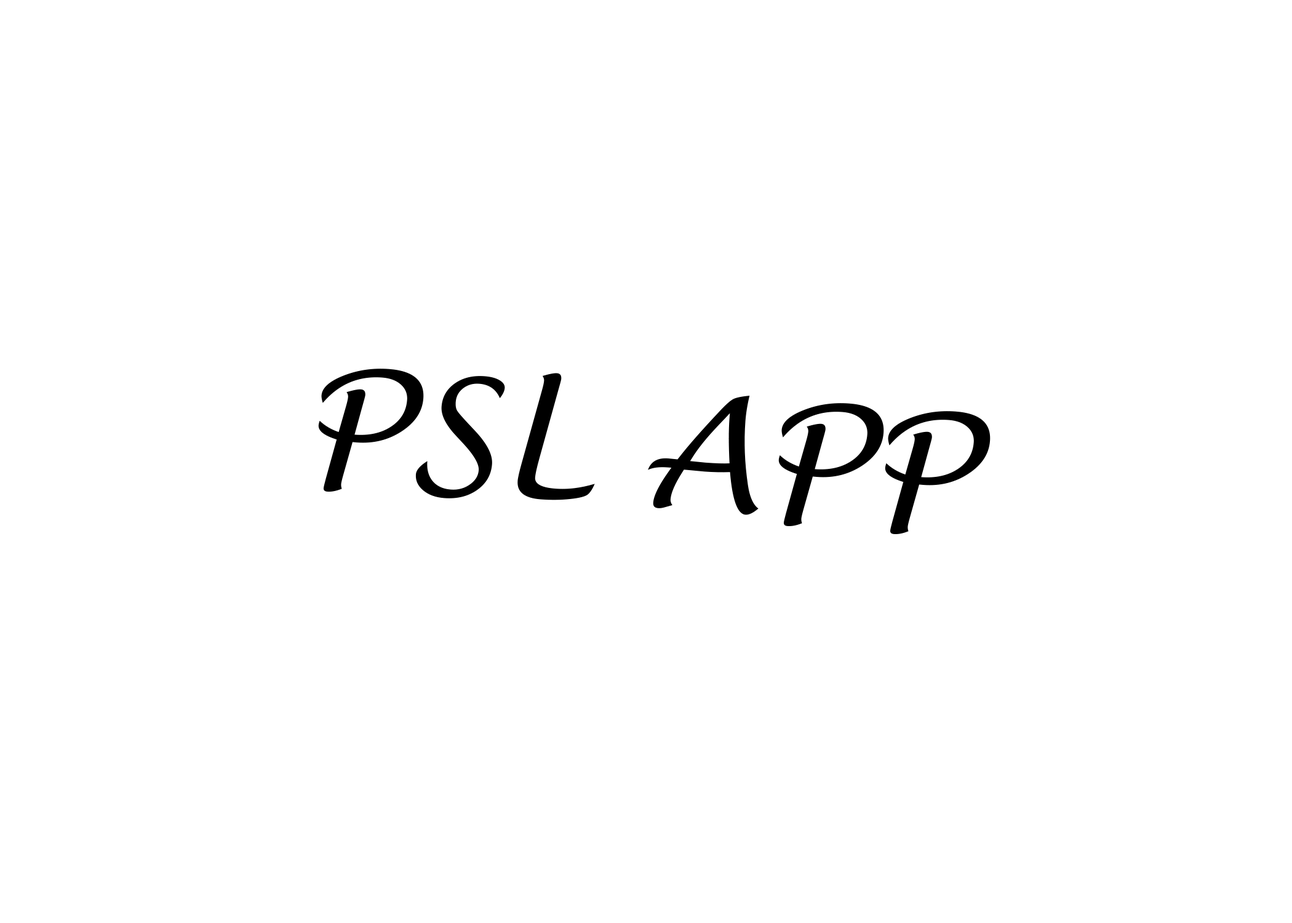
<style>
.page{position:relative;width:1292px;height:923px;background:#ffffff}
.page>*{position:absolute;margin:0}
.t1{font:156px "LucidaHandwriting-Italic";color:#000000}
</style>
<div class="page">
<p class="t1" style="left:318px;top:369px;width:673px;height:165px;rotate:4deg">PSL APP</p>
</div>
